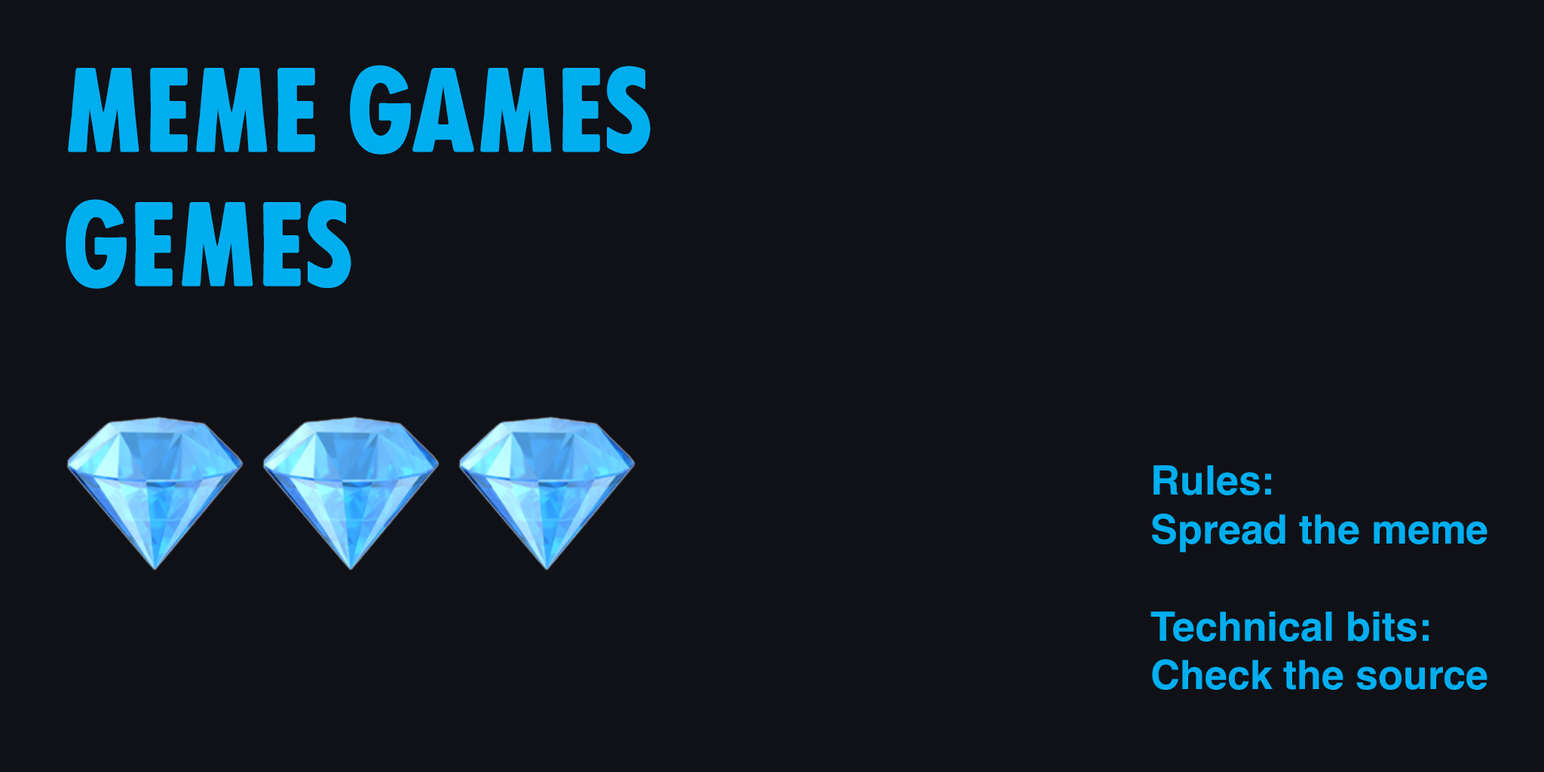
<style>
.page{position:relative;width:1544px;height:772px;background:#0f1117}
.page>*{position:absolute;margin:0}
.t1{font:111.6px "FUCXEDCAPSLatin-Regular";color:#00aeef}
.t2{font:40.5px "Helvetica-Bold";color:#00aeef}
</style>
<div class="page">
<p class="t1" style="left:66px;top:65px;width:585px;height:224px">MEME games<br>gemes</p>
<p class="t2" style="left:1151px;top:465px;width:337px;height:225px">Rules:<br>Spread the meme<br><br>Technical bits:<br>Check the source</p>
</div>
